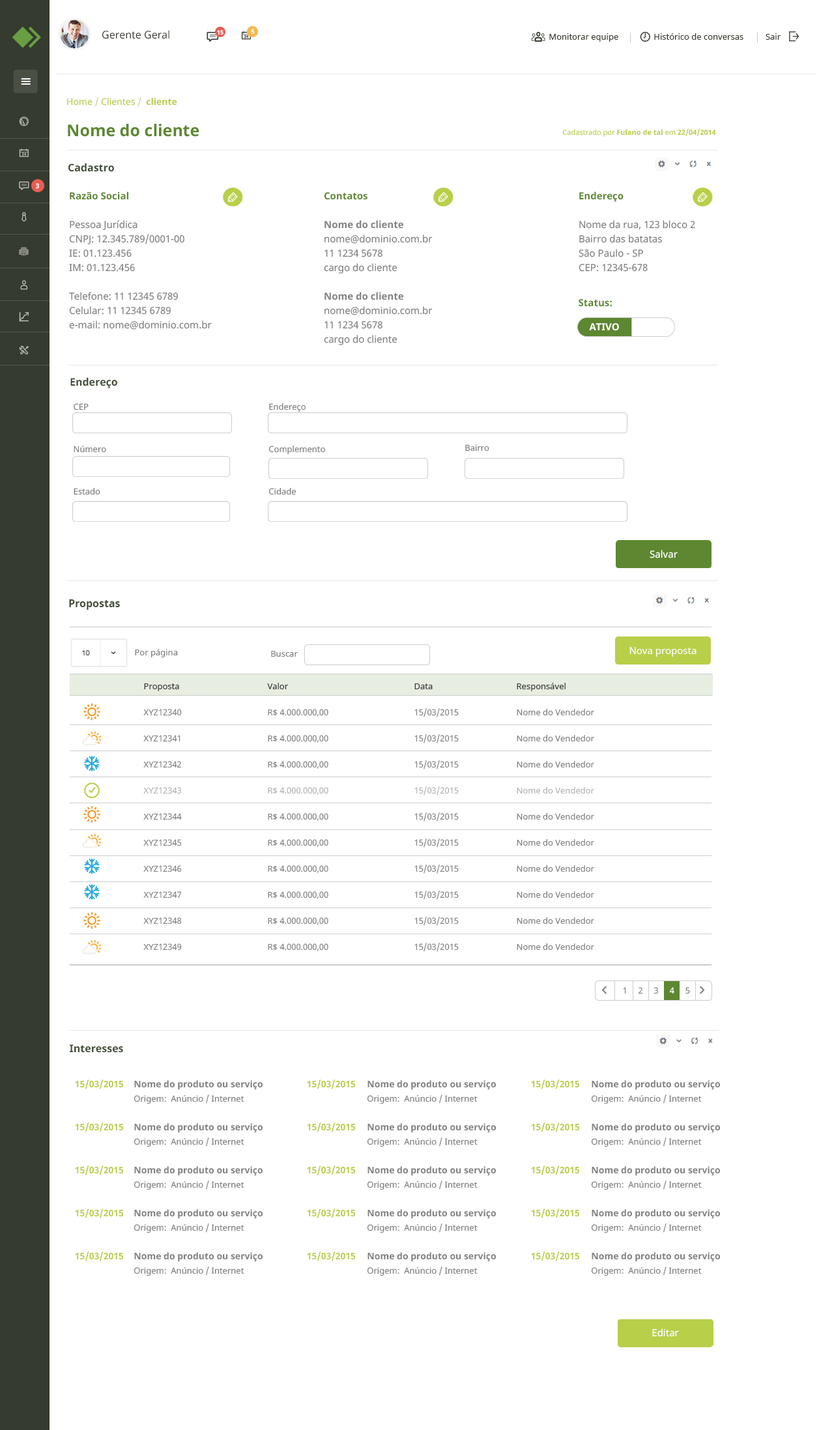
<style>
.page{position:relative;width:834px;height:1430px;background:#ffffff}
.page>*{position:absolute;margin:0}
.t1{font:10.4px "NotoSans";color:#353b2f}
.t2{font:5.9px "NotoSans-Bold";color:#ffffff}
.t3{font:6.5px "NotoSans-Bold";color:#ffffff}
.t4{font:8.5px "NotoSans";color:#353b2f}
.t5{font:9.1px "NotoSans";color:#b8cf49}
.t6{font:9.1px "NotoSans";color:#c7cfa1}
.t7{font:9.1px "NotoSans-Bold";color:#b8cf49}
.t8{font:16.3px "NotoSans-Bold";color:#5d8730}
.t9{font:7.2px "NotoSans";color:#b8cf49}
.t10{font:7.2px "NotoSans-Bold";color:#b8cf49}
.t11{font:10.4px "NotoSans-Bold";color:#424d38}
.t12{font:9.8px/14.3px "NotoSans";color:#808080}
.t13{font:9.8px/14.3px "NotoSans-Bold";color:#5d8730}
.t14{font:9.8px/14.3px "NotoSans-Bold";color:#808080}
.t15{font:9.8px "NotoSans-Bold";color:#5d8730}
.t16{font:9.8px "NotoSans-Bold";color:#ffffff}
.t17{font:8.5px/42.4px "NotoSans";color:#808080}
.t18{font:8.5px "NotoSans";color:#808080}
.t19{font:9.8px "NotoSans";color:#ffffff}
.t20{font:8.5px/26.1px "NotoSans";color:#808080}
.t21{font:8.5px/26.1px "NotoSans";color:#333333}
.t22{font:8.5px/26.1px "NotoSans";color:#b3b3b3}
.t23{font:9.1px/14.3px "NotoSans-Bold";color:#b8cf49}
.t24{font:8.5px/14.3px "NotoSans";color:#808080}
.t25{font:9.1px/14.3px "NotoSans-Bold";color:#808080}
</style>
<div class="page">
<p class="t1" style="left:102px;top:30px;width:67px;height:9px">Gerente Geral</p>
<p class="t2" style="left:217px;top:30px;width:6px;height:5px">15</p>
<p class="t3" style="left:251px;top:29px;width:4px;height:6px">5</p>
<p class="t4" style="left:549px;top:33px;width:231px;height:9px">Monitorar equipe                Histórico de conversas          Sair</p>
<p class="t5" style="left:67px;top:97px;width:110px;height:10px">Home <span class="t6">/</span> Clientes <span class="t6">/  </span><span class="t7">cliente</span></p>
<p class="t8" style="left:68px;top:124px;width:131px;height:13px">Nome do cliente</p>
<p class="t9" style="left:562px;top:128px;width:154px;height:9px">Cadastrado por<span class="t10"> Fulano de tal </span>em<span class="t10"> 22/04/2014</span></p>
<p class="t11" style="left:68px;top:163px;width:46px;height:9px">Cadastro</p>
<p class="t3" style="left:36px;top:183px;width:3px;height:6px">3</p>
<p class="t12" style="left:69px;top:192px;width:143px;height:138px"><span class="t13">Razão Social<br><br></span>Pessoa Jurídica<br>CNPJ: 12.345.789/0001-00<br>IE: 01.123.456<br>IM: 01.123.456<br><br>Telefone: 11 12345 6789<br>Celular: 11 12345 6789<br>e-mail: nome@dominio.com.br</p>
<p class="t12" style="left:324px;top:192px;width:109px;height:153px"><span class="t13">Contatos<br><br></span><span class="t14">Nome do cliente<br></span>nome@dominio.com.br<br>11 1234 5678<br>cargo do cliente<br><br><span class="t14">Nome do cliente<br></span>nome@dominio.com.br<br>11 1234 5678<br>cargo do cliente</p>
<p class="t12" style="left:579px;top:192px;width:116px;height:80px"><span class="t13">Endereço<br><br></span>Nome da rua, 123 bloco 2<br>Bairro das batatas<br>São Paulo - SP<br>CEP: 12345-678</p>
<p class="t15" style="left:579px;top:299px;width:33px;height:8px">Status:</p>
<p class="t16" style="left:589px;top:323px;width:30px;height:8px">ATIVO</p>
<p class="t11" style="left:70px;top:377px;width:47px;height:11px">Endereço</p>
<p class="t17" style="left:74px;top:403px;width:32px;height:92px">CEP<br>Número<br>Estado</p>
<p class="t17" style="left:268px;top:403px;width:57px;height:92px">Endereço<br>Complemento<br>Cidade</p>
<p class="t18" style="left:465px;top:444px;width:24px;height:7px">Bairro</p>
<p class="t19" style="left:650px;top:550px;width:28px;height:8px">Salvar</p>
<p class="t11" style="left:69px;top:599px;width:51px;height:11px">Propostas</p>
<p class="t18" style="left:135px;top:649px;width:43px;height:8px">Por página</p>
<p class="t18" style="left:271px;top:651px;width:27px;height:6px">Buscar</p>
<p class="t19" style="left:629px;top:647px;width:67px;height:10px">Nova proposta</p>
<p class="t20" style="left:143px;top:683px;width:39px;height:267px"><span class="t21">Proposta<br></span>XYZ12340<br>XYZ12341<br>XYZ12342<br><span class="t22">XYZ12343<br></span>XYZ12344<br>XYZ12345<br>XYZ12346<br>XYZ12347<br>XYZ12348<br>XYZ12349</p>
<p class="t20" style="left:267px;top:683px;width:61px;height:268px"><span class="t21">Valor<br></span>R$ 4.000.000,00<br>R$ 4.000.000,00<br>R$ 4.000.000,00<br><span class="t22">R$ 4.000.000,00<br></span>R$ 4.000.000,00<br>R$ 4.000.000,00<br>R$ 4.000.000,00<br>R$ 4.000.000,00<br>R$ 4.000.000,00<br>R$ 4.000.000,00</p>
<p class="t20" style="left:414px;top:683px;width:45px;height:269px"><span class="t21">Data<br></span>15/03/2015<br>15/03/2015<br>15/03/2015<br><span class="t22">15/03/2015<br></span>15/03/2015<br>15/03/2015<br>15/03/2015<br>15/03/2015<br>15/03/2015<br>15/03/2015</p>
<p class="t20" style="left:517px;top:683px;width:77px;height:267px"><span class="t21">Responsável<br></span>Nome do Vendedor<br>Nome do Vendedor<br>Nome do Vendedor<br><span class="t22">Nome do Vendedor<br></span>Nome do Vendedor<br>Nome do Vendedor<br>Nome do Vendedor<br>Nome do Vendedor<br>Nome do Vendedor<br>Nome do Vendedor</p>
<p class="t11" style="left:70px;top:1044px;width:53px;height:9px">Interesses</p>
<p class="t23" style="left:75px;top:1079px;width:48px;height:182px;text-align:right">15/03/2015<br><br><br>15/03/2015<br><br><br>15/03/2015 <br><br><br>15/03/2015<br><br><br>15/03/2015</p>
<p class="t24" style="left:134px;top:1080px;width:129px;height:196px"><span class="t25">Nome do produto ou serviço   <br></span>Origem:  Anúncio / Internet<br><br><span class="t25">Nome do produto ou serviço   <br></span>Origem:  Anúncio / Internet<br><br><span class="t25">Nome do produto ou serviço   <br></span>Origem:  Anúncio / Internet<br><br><span class="t25">Nome do produto ou serviço   <br></span>Origem:  Anúncio / Internet<br><br><span class="t25">Nome do produto ou serviço   <br></span>Origem:  Anúncio / Internet</p>
<p class="t23" style="left:307px;top:1079px;width:48px;height:182px;text-align:right">15/03/2015<br><br><br>15/03/2015<br><br><br>15/03/2015 <br><br><br>15/03/2015<br><br><br>15/03/2015</p>
<p class="t24" style="left:367px;top:1080px;width:129px;height:196px"><span class="t25">Nome do produto ou serviço   <br></span>Origem:  Anúncio / Internet<br><br><span class="t25">Nome do produto ou serviço   <br></span>Origem:  Anúncio / Internet<br><br><span class="t25">Nome do produto ou serviço   <br></span>Origem:  Anúncio / Internet<br><br><span class="t25">Nome do produto ou serviço   <br></span>Origem:  Anúncio / Internet<br><br><span class="t25">Nome do produto ou serviço   <br></span>Origem:  Anúncio / Internet</p>
<p class="t23" style="left:531px;top:1079px;width:48px;height:182px;text-align:right">15/03/2015<br><br><br>15/03/2015<br><br><br>15/03/2015 <br><br><br>15/03/2015<br><br><br>15/03/2015</p>
<p class="t24" style="left:591px;top:1080px;width:129px;height:196px"><span class="t25">Nome do produto ou serviço   <br></span>Origem:  Anúncio / Internet<br><br><span class="t25">Nome do produto ou serviço   <br></span>Origem:  Anúncio / Internet<br><br><span class="t25">Nome do produto ou serviço   <br></span>Origem:  Anúncio / Internet<br><br><span class="t25">Nome do produto ou serviço   <br></span>Origem:  Anúncio / Internet<br><br><span class="t25">Nome do produto ou serviço   <br></span>Origem:  Anúncio / Internet</p>
<p class="t19" style="left:652px;top:1328px;width:27px;height:9px">Editar</p>
</div>
